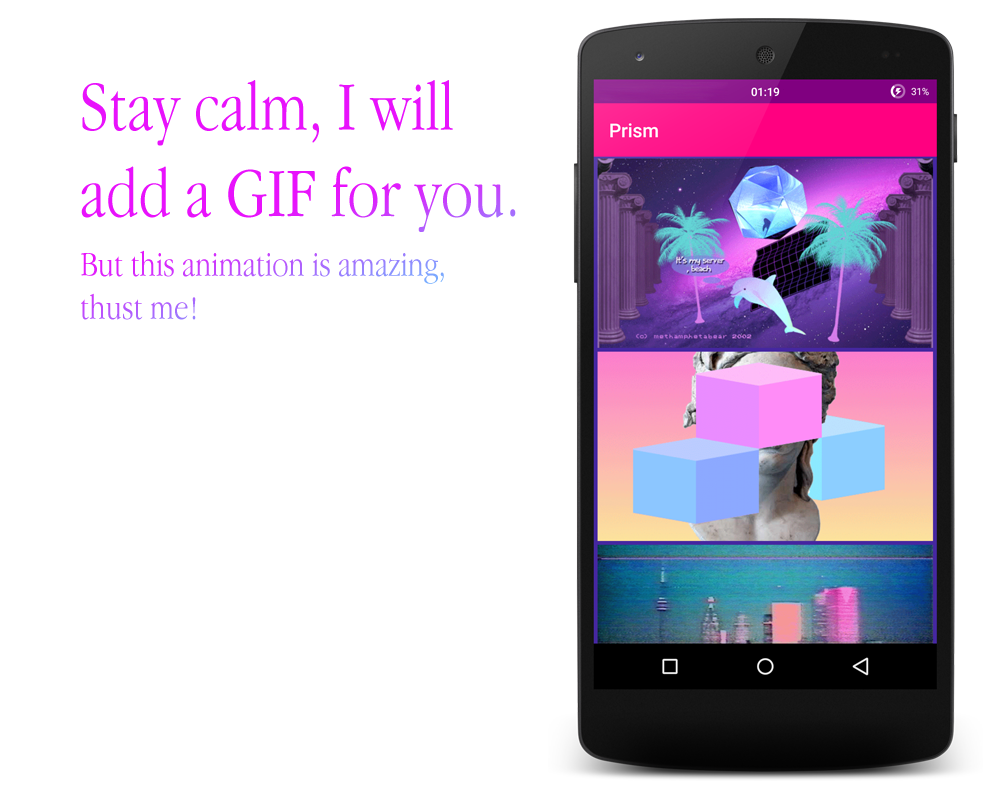
<style>
.page{position:relative;width:1000px;height:800px;background:#ffffff}
.page>*{position:absolute;margin:0}
.t1{font:72px "AppleGaramondLight";color:#e812fc}
.t2{font:72px "AppleGaramondLight";color:#a66dfd}
.t3{font:36px "AppleGaramondLight"}
.t4{font:36px "AppleGaramondLight";color:#a869fe}
</style>
<div class="page">
<p class="t1" style="left:81px;top:80px;width:423px;height:152px;text-align:right">Stay calm, I will add a GIF for you</p>
<p class="t2" style="left:510px;top:209px;width:6px;height:8px">.</p>
<p class="t3" style="left:81px;top:250px;width:363px;height:70px;text-align:right">But this animation is amazing, thust me</p>
<p class="t4" style="left:192px;top:297px;width:4px;height:23px">!</p>
</div>
